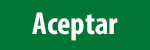
<style>
.page{position:relative;width:150px;height:50px;background:#007536}
.page>*{position:absolute;margin:0}
.t1{font:32px "MyriadPro-BoldCond";color:#ffffff}
</style>
<div class="page">
<p class="t1" style="left:32px;top:12px;width:86px;height:29px">Aceptar</p>
</div>
